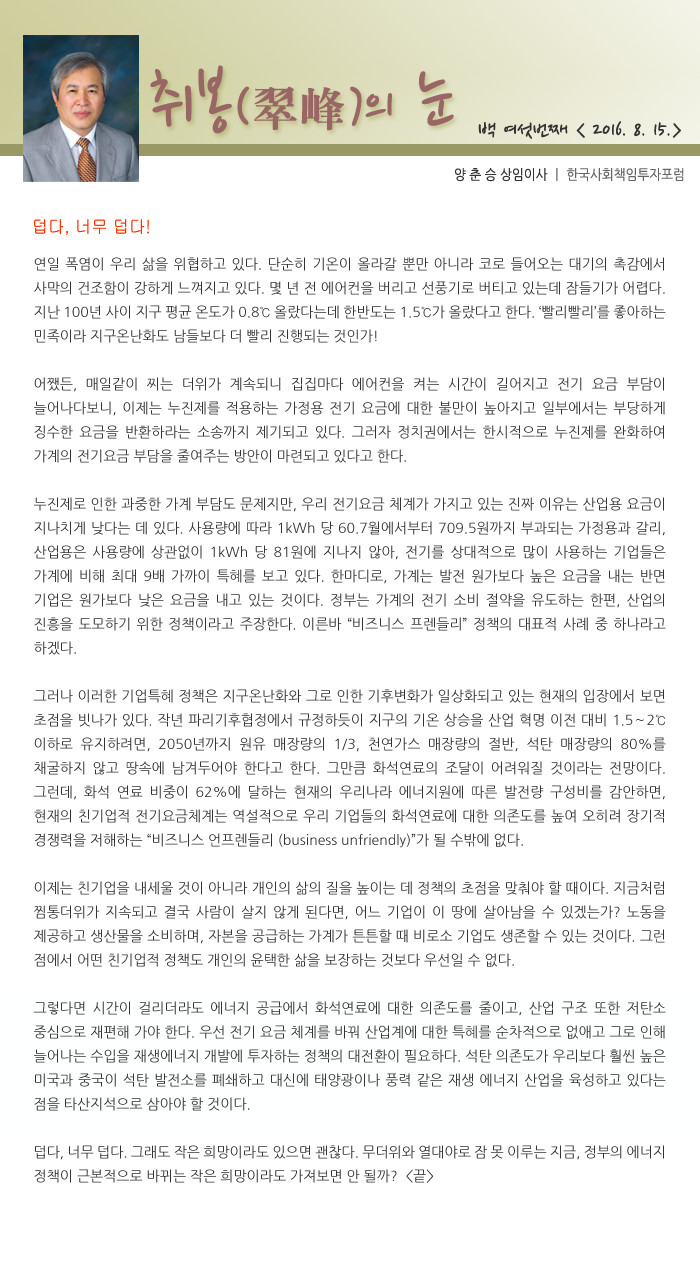
<style>
.page{position:relative;width:700px;height:1276px;background:#ffffff}
.page>*{position:absolute;margin:0}
.t1{font:77.5px "NanumPen";color:#996666}
.t2{font:60px "NanumPen";color:#996666}
.t3{font:48px "H2mjrE";color:#996666}
.t4{font:24px "NanumPen";color:#333333}
.t5{font:14px "NanumGothic";color:#666666;scale:0.9 1}
.t6{font:14px "NanumGothic";color:#333333;scale:0.9 1}
.t7{font:18px "Gulim";color:#ff3300;scale:0.9 1}
.t8{font:14px/24px "NanumGothic";color:#333333}
</style>
<div class="page">
<p class="t1" style="left:150px;top:65px;width:304px;height:69px">취봉<span class="t2">(</span><span class="t3">翠峰</span><span class="t2">)</span><span class="t2">의</span> 눈</p>
<p class="t4" style="left:478px;top:121px;width:203px;height:18px">백 여섯번째 &lt; 2016. 8. 15.&gt;</p>
<p class="t5" style="left:455px;top:168px;width:229px;height:14px"><span class="t6">양 춘 승 상임이사 </span>ㅣ 한국사회책임투자포럼</p>
<p class="t7" style="left:34px;top:219px;width:115px;height:16px">덥다, 너무 덥다!</p>
<p class="t8" style="left:34px;top:257px;width:632px;height:926px;text-align:justify">연일 폭염이 우리 삶을 위협하고 있다. 단순히 기온이 올라갈 뿐만 아니라 코로 들어오는 대기의 촉감에서 사막의 건조함이 강하게 느껴지고 있다. 몇 년 전 에어컨을 버리고 선풍기로 버티고 있는데 잠들기가 어렵다. 지난 100년 사이 지구 평균 온도가 0.8℃ 올랐다는데 한반도는 1.5℃가 올랐다고 한다. ‘빨리빨리’를 좋아하는 민족이라 지구온난화도 남들보다 더 빨리 진행되는 것인가!<br><br>어쨌든, 매일같이 찌는 더위가 계속되니 집집마다 에어컨을 켜는 시간이 길어지고 전기 요금 부담이 늘어나다보니, 이제는 누진제를 적용하는 가정용 전기 요금에 대한 불만이 높아지고 일부에서는 부당하게 징수한 요금을 반환하라는 소송까지 제기되고 있다. 그러자 정치권에서는 한시적으로 누진제를 완화하여 가계의 전기요금 부담을 줄여주는 방안이 마련되고 있다고 한다.<br><br>누진제로 인한 과중한 가계 부담도 문제지만, 우리 전기요금 체계가 가지고 있는 진짜 이유는 산업용 요금이 지나치게 낮다는 데 있다. 사용량에 따라 1kWh 당 60.7월에서부터 709.5원까지 부과되는 가정용과 갈리, 산업용은 사용량에 상관없이 1kWh 당 81원에 지나지 않아, 전기를 상대적으로 많이 사용하는 기업들은 가계에 비해 최대 9배 가까이 특혜를 보고 있다. 한마디로, 가계는 발전 원가보다 높은 요금을 내는 반면 기업은 원가보다 낮은 요금을 내고 있는 것이다. 정부는 가계의 전기 소비 절약을 유도하는 한편, 산업의 진흥을 도모하기 위한 정책이라고 주장한다. 이른바 “비즈니스 프렌들리” 정책의 대표적 사례 중 하나라고 하겠다. <br><br>그러나 이러한 기업특혜 정책은 지구온난화와 그로 인한 기후변화가 일상화되고 있는 현재의 입장에서 보면 초점을 빗나가 있다. 작년 파리기후협정에서 규정하듯이 지구의 기온 상승을 산업 혁명 이전 대비 1.5∼2℃ 이하로 유지하려면, 2050년까지 원유 매장량의 1/3, 천연가스 매장량의 절반, 석탄 매장량의 80%를 채굴하지 않고 땅속에 남겨두어야 한다고 한다. 그만큼 화석연료의 조달이 어려워질 것이라는 전망이다. 그런데, 화석 연료 비중이 62%에 달하는 현재의 우리나라 에너지원에 따른 발전량 구성비를 감안하면, 현재의 친기업적 전기요금체계는 역설적으로 우리 기업들의 화석연료에 대한 의존도를 높여 오히려 장기적 경쟁력을 저해하는 “비즈니스 언프렌들리 (business unfriendly)”가 될 수밖에 없다.<br><br>이제는 친기업을 내세울 것이 아니라 개인의 삶의 질을 높이는 데 정책의 초점을 맞춰야 할 때이다. 지금처럼 찜통더위가 지속되고 결국 사람이 살지 않게 된다면, 어느 기업이 이 땅에 살아남을 수 있겠는가? 노동을 제공하고 생산물을 소비하며, 자본을 공급하는 가계가 튼튼할 때 비로소 기업도 생존할 수 있는 것이다. 그런 점에서 어떤 친기업적 정책도 개인의 윤택한 삶을 보장하는 것보다 우선일 수 없다. <br><br>그렇다면 시간이 걸리더라도 에너지 공급에서 화석연료에 대한 의존도를 줄이고, 산업 구조 또한 저탄소 중심으로 재편해 가야 한다. 우선 전기 요금 체계를 바꿔 산업계에 대한 특혜를 순차적으로 없애고 그로 인해 늘어나는 수입을 재생에너지 개발에 투자하는 정책의 대전환이 필요하다. 석탄 의존도가 우리보다 훨씬 높은 미국과 중국이 석탄 발전소를 폐쇄하고 대신에 태양광이나 풍력 같은 재생 에너지 산업을 육성하고 있다는 점을 타산지석으로 삼아야 할 것이다.<br><br>덥다, 너무 덥다. 그래도 작은 희망이라도 있으면 괜찮다. 무더위와 열대야로 잠 못 이루는 지금, 정부의 에너지 정책이 근본적으로 바뀌는 작은 희망이라도 가져보면 안 될까?  &lt;끝&gt;</p>
</div>
